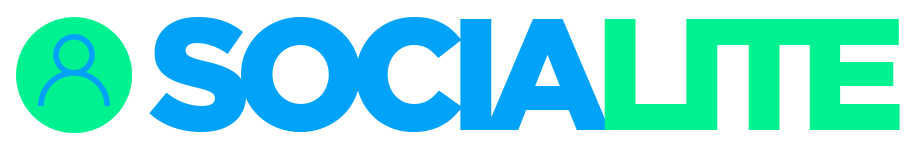
<style>
.page{position:relative;width:914px;height:151px;background:#ffffff}
.page>*{position:absolute;margin:0}
.t1{font:157.6px "GothamBlack";letter-spacing:-0.1em;color:#00a3f9}
.t2{font:157.6px "GothamBlack";letter-spacing:-0.1em;color:#00f190}
</style>
<div class="page">
<p class="t1" style="left:149px;top:17px;width:751px;height:115px">SOCIA<span class="t2">LITE</span></p>
</div>
